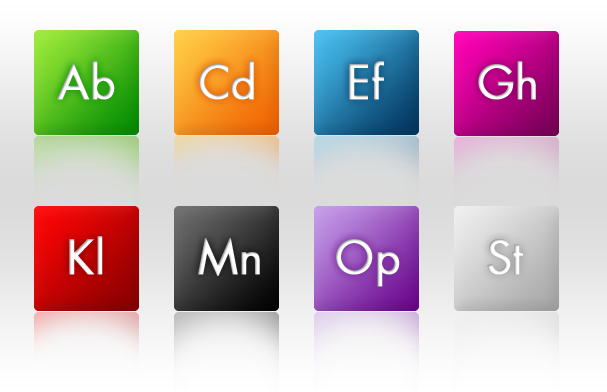
<style>
.page{position:relative;width:607px;height:392px}
.page>*{position:absolute;margin:0}
.t1{font:45px "FuturaStd-Book";color:#ffffff;font-weight:bold}
</style>
<div class="page">
<p class="t1" style="left:57px;top:61px;width:58px;height:39px">Ab</p>
<p class="t1" style="left:199px;top:61px;width:55px;height:39px">Cd</p>
<p class="t1" style="left:349px;top:61px;width:35px;height:39px">Ef</p>
<p class="t1" style="left:478px;top:61px;width:58px;height:39px">Gh</p>
<p class="t1" style="left:69px;top:236px;width:34px;height:39px">Kl</p>
<p class="t1" style="left:198px;top:238px;width:62px;height:38px">Mn</p>
<p class="t1" style="left:336px;top:239px;width:64px;height:48px">Op</p>
<p class="t1" style="left:487px;top:239px;width:36px;height:36px">St</p>
</div>
